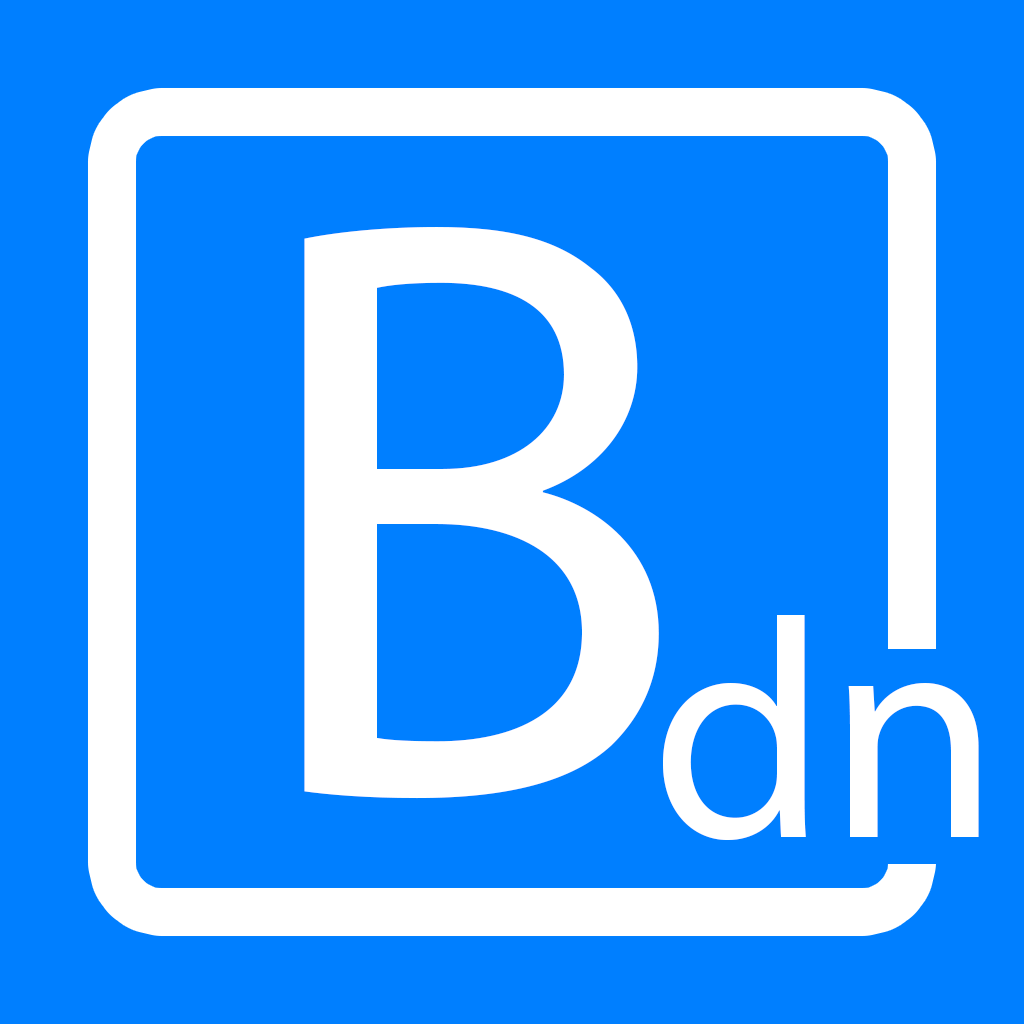
<style>
.page{position:relative;width:1024px;height:1024px;background:#007fff}
.page>*{position:absolute;margin:0}
.t1{font:833.3px "MyriadPro-Regular";color:#ffffff}
.t2{font:312.5px "MyriadPro-Regular";color:#ffffff}
</style>
<div class="page">
<p class="t1" style="left:304px;top:227px;width:355px;height:572px">B</p>
<p class="t2" style="left:663px;top:615px;width:316px;height:225px">dn</p>
</div>
